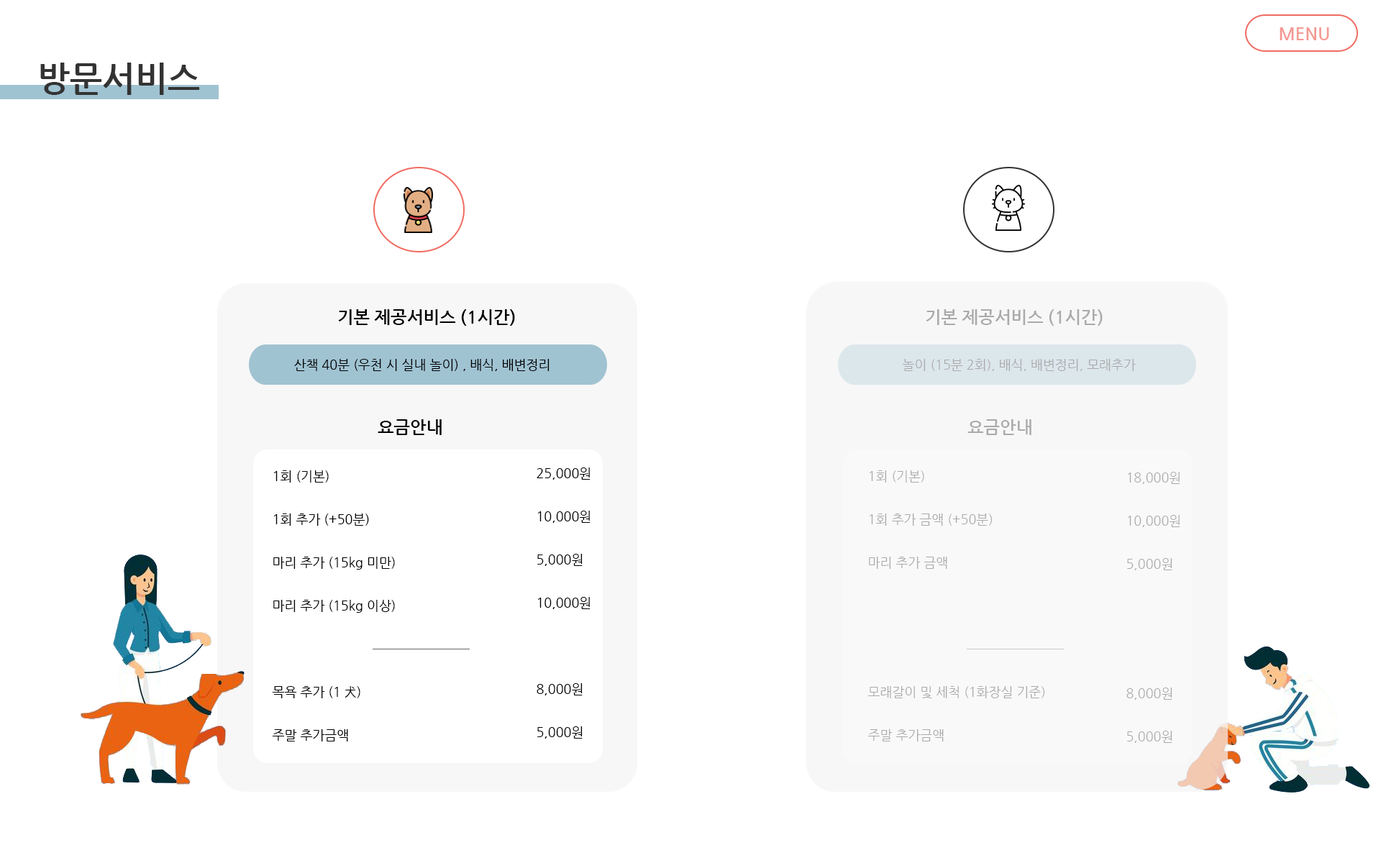
<style>
.page{position:relative;width:1381px;height:863px;background:#ffffff}
.page>*{position:absolute;margin:0}
.t1{font:17.3px "NanumGothicBold";color:#f59892}
.t2{font:34.5px "NanumGothicBold";color:#333333}
.t3{font:17.3px "NanumGothicBold";color:#000000}
.t4{font:17.3px "NanumGothicBold";color:#aaaaaa}
.t5{font:12.9px "NanumGothic";color:#000000}
.t6{font:12.9px "NanumGothic";color:#aaaaaa}
.t7{font:12.9px/43.2px "NanumGothic";color:#000000}
.t8{font:12.9px/43.2px "NanumGothic";color:#aaaaaa}
</style>
<div class="page">
<p class="t1" style="left:1280px;top:27px;width:49px;height:13px">MENU</p>
<p class="t2" style="left:40px;top:63px;width:160px;height:32px">방문서비스</p>
<p class="t3" style="left:338px;top:309px;width:177px;height:17px">기본 제공서비스 (1시간)</p>
<p class="t4" style="left:926px;top:309px;width:177px;height:17px">기본 제공서비스 (1시간)</p>
<p class="t5" style="left:294px;top:359px;width:256px;height:12px">산책 40분 (우천 시 실내 놀이) , 배식, 배변정리</p>
<p class="t6" style="left:902px;top:359px;width:234px;height:12px">놀이 (15분 2회), 배식, 배변정리, 모래추가</p>
<p class="t3" style="left:378px;top:419px;width:64px;height:16px">요금안내</p>
<p class="t4" style="left:968px;top:419px;width:64px;height:16px">요금안내</p>
<p class="t7" style="left:272px;top:470px;width:123px;height:272px">1회 (기본)<br>1회 추가 (+50분)<br>마리 추가 (15kg 미만)<br>마리 추가 (15kg 이상)<br><br>목욕 추가 (1 犬)<br>주말 추가금액</p>
<p class="t7" style="left:537px;top:468px;width:54px;height:271px">25,000원<br>10,000원<br>5,000원<br>10,000원<br><br>8,000원<br>5,000원</p>
<p class="t8" style="left:868px;top:470px;width:177px;height:272px">1회 (기본)<br>1회 추가 금액 (+50분)<br>마리 추가 금액<br><br><br>모래갈이 및 세척 (1화장실 기준)<br>주말 추가금액</p>
<p class="t8" style="left:1127px;top:472px;width:54px;height:271px">18,000원<br>10,000원<br>5,000원<br><br><br>8,000원<br>5,000원</p>
</div>
